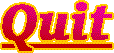
<style>
.page{position:relative;width:114px;height:53px;background:#ffffff}
.page>*{position:absolute;margin:0}
.t1{font:52.9px "SitkaText-BoldItalic";font-weight:bold;scale:0.93 1}
</style>
<div class="page">
<p class="t1" style="left:2px;top:2px;width:110px;height:49px">Quit</p>
</div>
